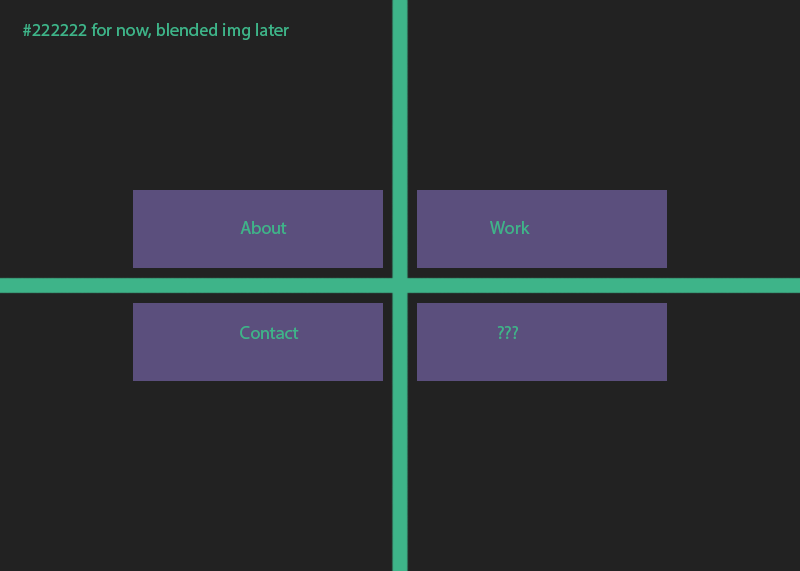
<style>
.page{position:relative;width:800px;height:571px;background:#222222}
.page>*{position:absolute;margin:0}
.t1{font:18px "MyriadPro-Regular";color:#3eb489}
</style>
<div class="page">
<p class="t1" style="left:23px;top:23px;width:266px;height:17px">#222222 for now, blended img later</p>
<p class="t1" style="left:240px;top:221px;width:47px;height:13px">About</p>
<p class="t1" style="left:490px;top:221px;width:40px;height:13px">Work</p>
<p class="t1" style="left:240px;top:326px;width:59px;height:13px">Contact</p>
<p class="t1" style="left:497px;top:326px;width:21px;height:13px">???</p>
</div>
